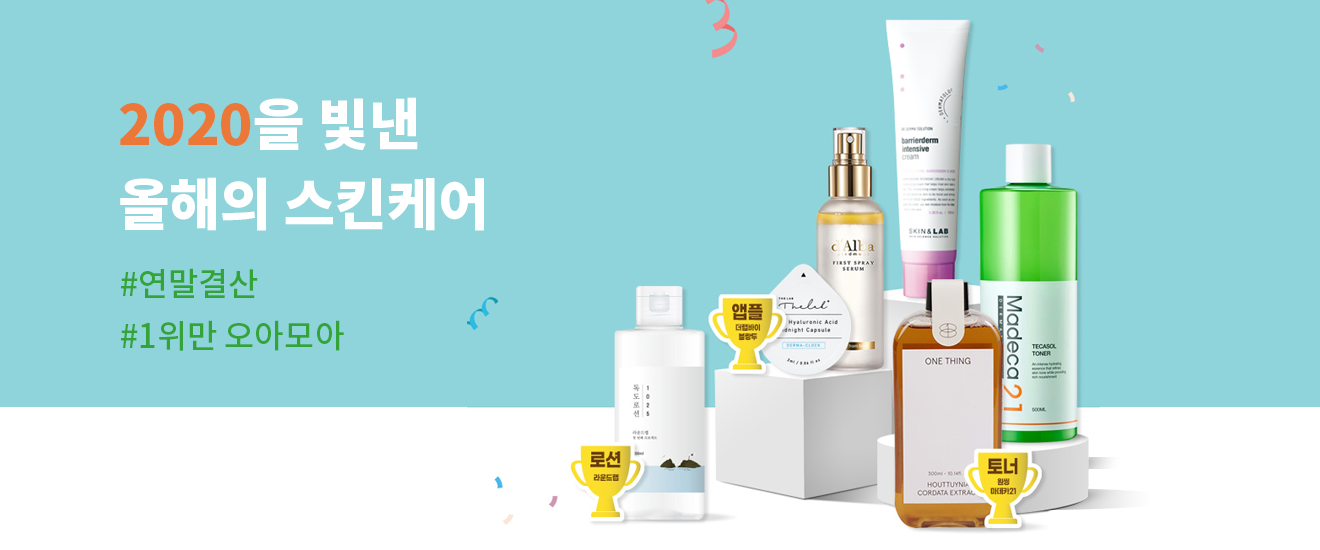
<style>
.page{position:relative;width:1320px;height:550px;background:#8fd4db}
.page>*{position:absolute;margin:0}
.t1{font:55.7px/80px "NotoSansCJKkr-Black";color:#ffffff;text-transform:uppercase}
.t2{font:55.7px/80px "NotoSansCJKkr-Black";color:#eb7839;text-transform:uppercase}
.t3{font:32.7px/52px "NotoSansCJKkr-Medium";color:#35a438}
</style>
<div class="page">
<p class="t1" style="left:119px;top:97px;width:365px;height:134px"><span class="t2">2020</span>을 빛낸<br>올해의 스킨케어</p>
<p class="t3" style="left:121px;top:268px;width:223px;height:83px">#연말결산<br>#1위만 오아모아</p>
</div>
